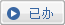
<style>
.page{position:relative;width:65px;height:25px;background:#f4f4f4}
.page>*{position:absolute;margin:0}
.t1{font:12px "SimSun";letter-spacing:0.075em;color:#3967a3}
</style>
<div class="page">
<p class="t1" style="left:30px;top:7px;width:23px;height:12px">已办</p>
</div>
